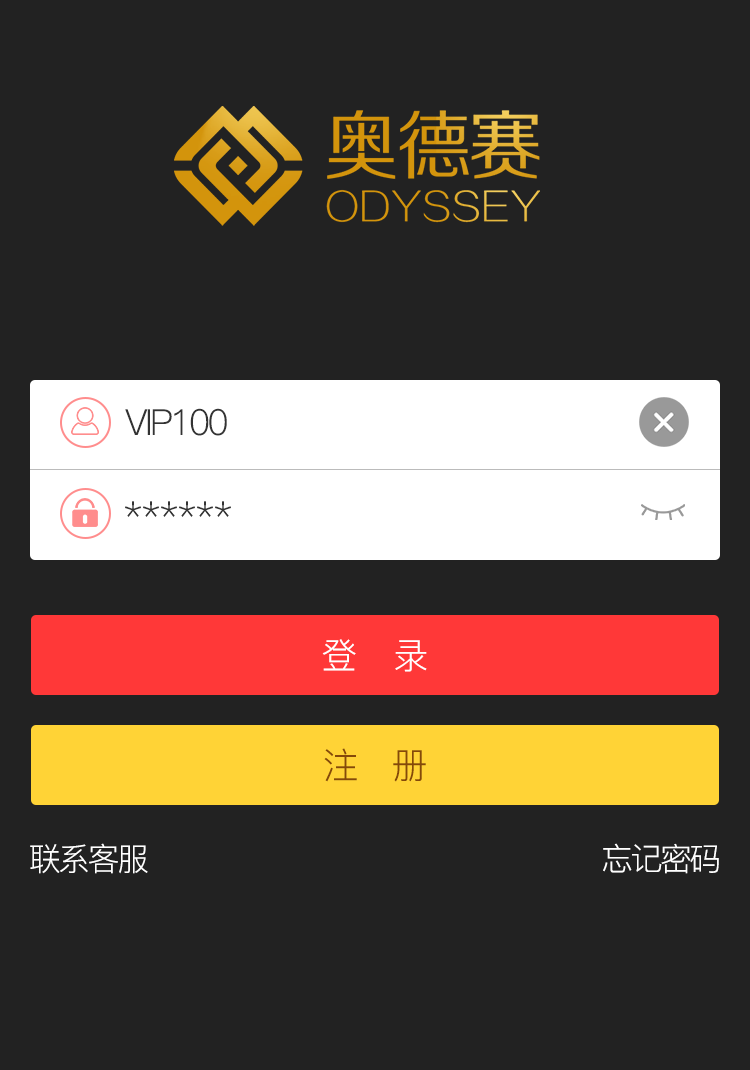
<style>
.page{position:relative;width:750px;height:1070px;background:#222222}
.page>*{position:absolute;margin:0}
.t1{font:36px "PingFang-SC-Regular";letter-spacing:-0.08em;color:#333333}
.t2{font:36px "PingFang-SC-Regular";color:#333333}
.t3{font:36px "PingFang-SC-Regular";letter-spacing:-0.08em;color:#ffffff}
.t4{font:36px "PingFang-SC-Regular";letter-spacing:-0.08em;color:#854909}
.t5{font:32px "PingFang-SC-Regular";letter-spacing:-0.08em;color:#ffffff}
</style>
<div class="page">
<p class="t1" style="left:125px;top:408px;width:102px;height:28px">VIP100</p>
<p class="t2" style="left:125px;top:501px;width:106px;height:16px">******</p>
<p class="t3" style="left:322px;top:639px;width:105px;height:33px">登  录</p>
<p class="t4" style="left:324px;top:748px;width:102px;height:34px">注 册</p>
<p class="t5" style="left:30px;top:843px;width:689px;height:31px">联系客服                 忘记密码</p>
</div>
